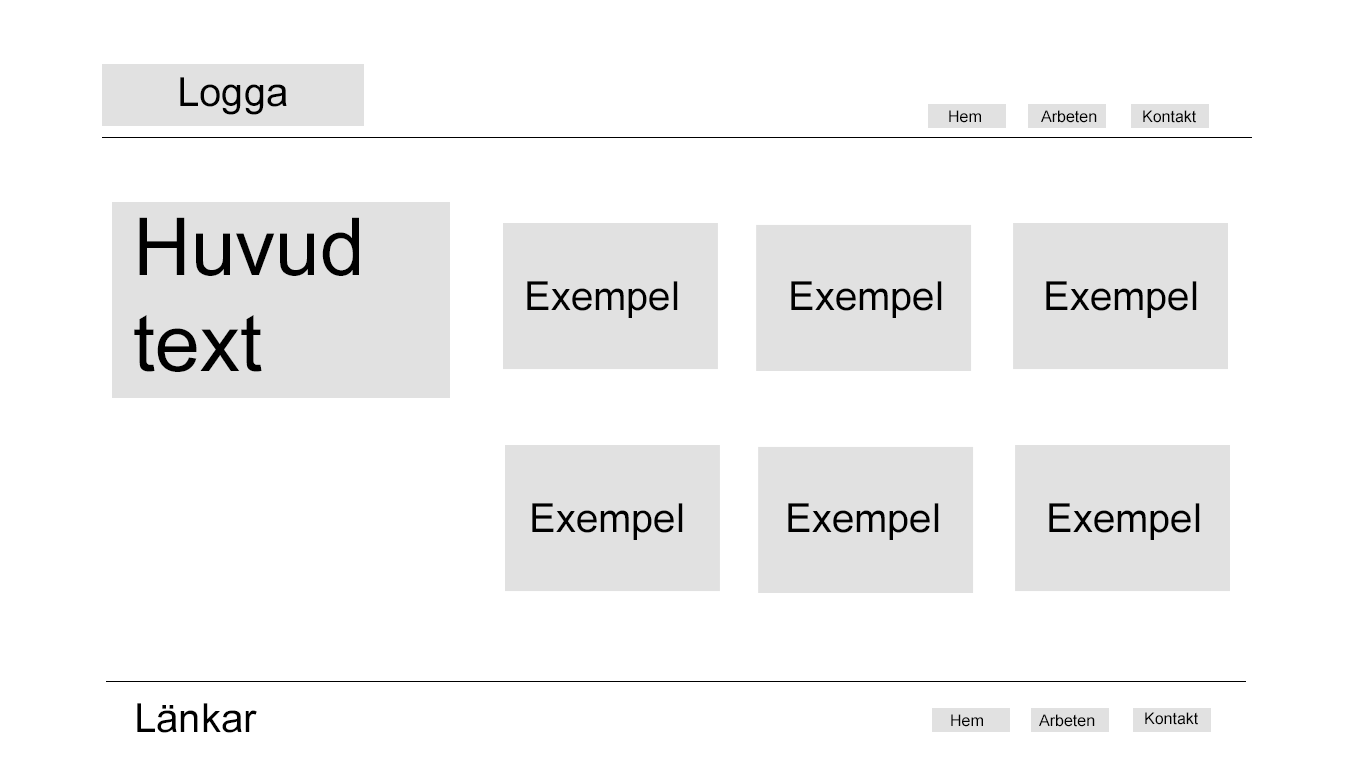
<style>
.page{position:relative;width:1366px;height:768px;background:#ffffff}
.page>*{position:absolute;margin:0}
.t1{font:40px "ArialMT";color:#000000}
.t2{font:16px "ArialMT";color:#000000}
.t3{font:80px "ArialMT";color:#000000}
</style>
<div class="page">
<p class="t1" style="left:180px;top:77px;width:107px;height:38px">Logga</p>
<p class="t2" style="left:949px;top:110px;width:32px;height:13px">Hem</p>
<p class="t2" style="left:1041px;top:110px;width:56px;height:13px">Arbeten</p>
<p class="t2" style="left:1143px;top:110px;width:53px;height:13px">Kontakt</p>
<p class="t3" style="left:134px;top:217px;width:225px;height:155px">Huvud text</p>
<p class="t1" style="left:527px;top:281px;width:151px;height:37px">Exempel</p>
<p class="t1" style="left:791px;top:281px;width:151px;height:37px">Exempel</p>
<p class="t1" style="left:1046px;top:281px;width:151px;height:37px">Exempel</p>
<p class="t1" style="left:532px;top:503px;width:151px;height:37px">Exempel</p>
<p class="t1" style="left:788px;top:503px;width:151px;height:37px">Exempel</p>
<p class="t1" style="left:1049px;top:503px;width:151px;height:37px">Exempel</p>
<p class="t1" style="left:137px;top:703px;width:120px;height:30px">Länkar</p>
<p class="t2" style="left:1145px;top:712px;width:53px;height:13px">Kontakt</p>
<p class="t2" style="left:951px;top:714px;width:32px;height:13px">Hem</p>
<p class="t2" style="left:1039px;top:714px;width:56px;height:13px">Arbeten</p>
</div>
